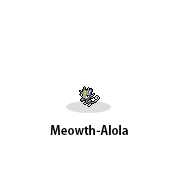
<style>
.page{position:relative;width:180px;height:180px;background:#ffffff}
.page>*{position:absolute;margin:0}
.t1{font:12px "AdobeGothicStd-Bold";color:#000000}
</style>
<div class="page">
<p class="t1" style="left:50px;top:125px;width:78px;height:10px">Meowth-Alola</p>
</div>
